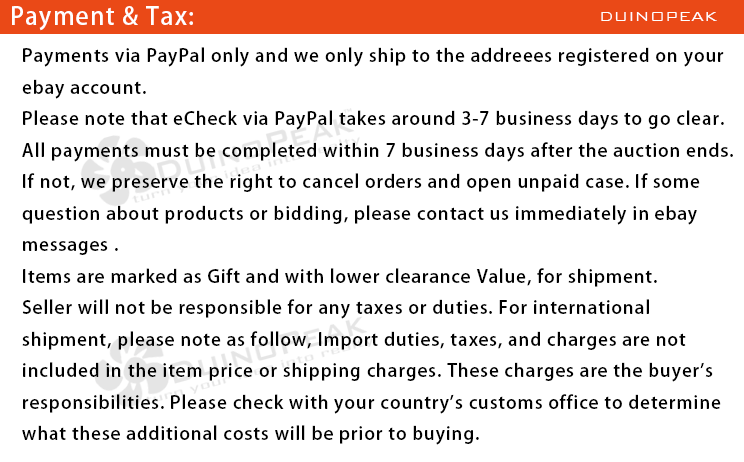
<style>
.page{position:relative;width:744px;height:462px;background:#ffffff}
.page>*{position:absolute;margin:0}
.t1{font:24px "AdobeHeitiStd-Regular";letter-spacing:0.05em;color:#ffffff}
.t2{font:18px "BankGothicBT-Light";color:#ffffff}
.t3{font:18px "AdobeHeitiStd-Regular";letter-spacing:0.05em;color:#000000}
</style>
<div class="page">
<p class="t1" style="left:12px;top:6px;width:181px;height:25px">Payment &amp; Tax:</p>
<p class="t2" style="left:601px;top:12px;width:116px;height:9px">DUINOPEAK</p>
<p class="t3" style="left:22px;top:47px;width:711px;height:398px">Payments via PayPal only and we only ship to the addreees registered on your <br>ebay account. <br>Please note that eCheck via PayPal takes around 3-7 business days to go clear.<br>All payments must be completed within 7 business days after the auction ends. <br>If not, we preserve the right to cancel orders and open unpaid case. If some <br>question about products or bidding, please contact us immediately in ebay <br>messages .<br>Items are marked as Gift and with lower clearance Value, for shipment.<br>Seller will not be responsible for any taxes or duties. For international <br>shipment, please note as follow, Import duties, taxes, and charges are not <br>included in the item price or shipping charges. These charges are the buyer's <br>responsibilities. Please check with your country's customs office to determine <br>what these additional costs will be prior to buying.</p>
</div>
